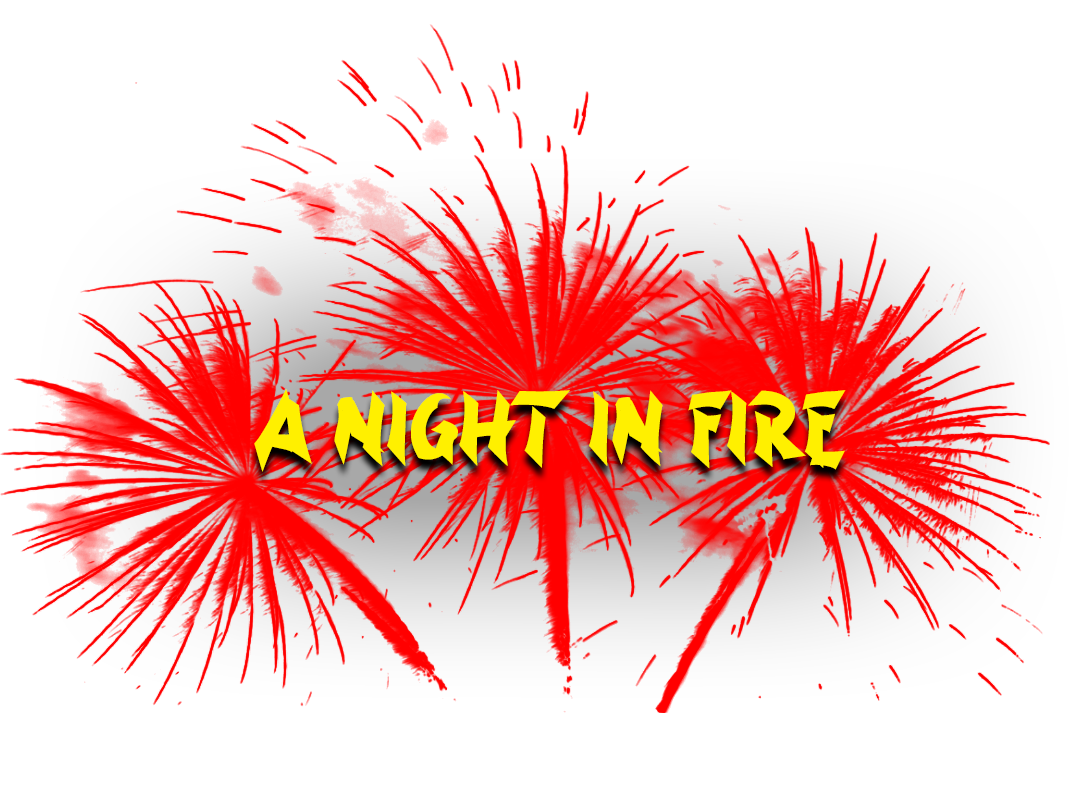
<style>
.page{position:relative;width:1069px;height:794px;background:#ffffff}
.page>*{position:absolute;margin:0}
.t1{font:100px "aAsianNinja";color:#fff000}
</style>
<div class="page">
<p class="t1" style="left:254px;top:389px;width:592px;height:83px">A Night in Fire</p>
</div>
